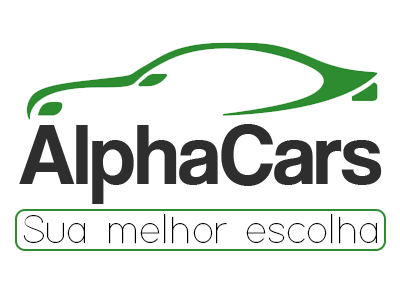
<style>
.page{position:relative;width:400px;height:300px;background:#ffffff}
.page>*{position:absolute;margin:0}
.t1{font:86.8px "CoolveticaRg-Regular";color:#2e2e2e}
.t2{font:41.8px "Adam";color:#000000}
</style>
<div class="page">
<p class="t1" style="left:19px;top:124px;width:363px;height:80px">AlphaCars</p>
<p class="t2" style="left:23px;top:214px;width:354px;height:30px">Sua melhor escolha</p>
</div>
